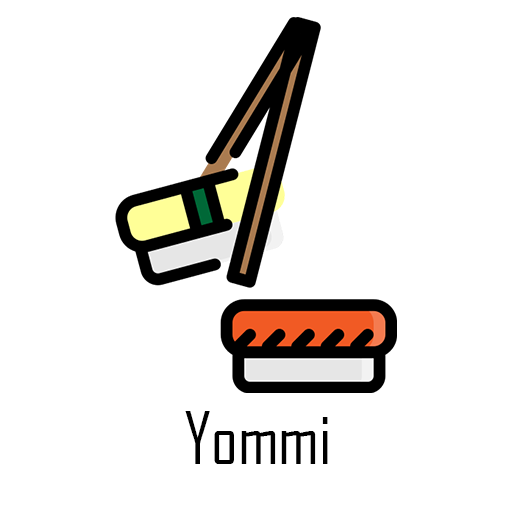
<style>
.page{position:relative;width:512px;height:512px;background:#ffffff}
.page>*{position:absolute;margin:0}
.t1{font:70px "AgencyFB-Reg";color:#000000}
</style>
<div class="page">
<p class="t1" style="left:185px;top:411px;width:143px;height:53px">Yommi</p>
</div>
